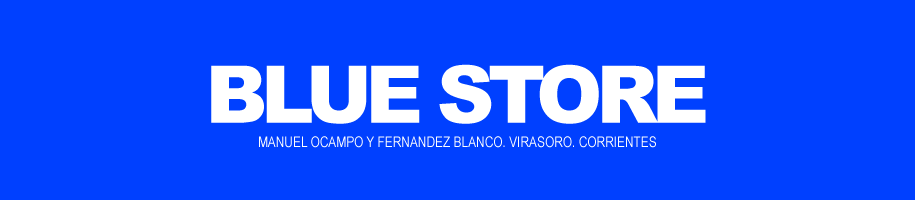
<style>
.page{position:relative;width:915px;height:200px;background:#0040ff}
.page>*{position:absolute;margin:0}
.t1{font:79.6px "Arial-Black";letter-spacing:-0.08em;color:#ffffff}
.t2{font:14.5px "ArialNarrow";color:#ffffff;text-transform:uppercase}
</style>
<div class="page">
<p class="t1" style="left:211px;top:64px;width:495px;height:60px">BLUE STORE</p>
<p class="t2" style="left:259px;top:136px;width:397px;height:12px">Manuel Ocampo y Fernandez Blanco. Virasoro. Corrientes</p>
</div>
